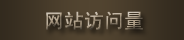
<style>
.page{position:relative;width:184px;height:40px}
.page>*{position:absolute;margin:0}
.t1{font:20px "SimHei";color:#ac9c85}
</style>
<div class="page">
<p class="t1" style="left:46px;top:11px;width:97px;height:19px">网站访问量</p>
</div>
